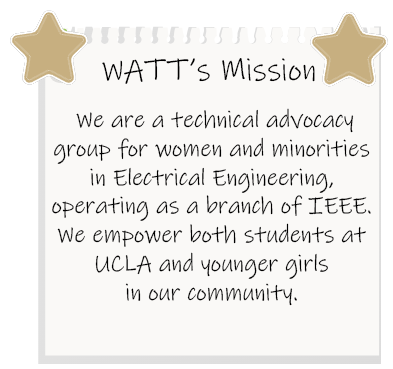
<style>
.page{position:relative;width:393px;height:369px;background:#faf9f7}
.page>*{position:absolute;margin:0}
.t1{font:32px "InkFree";color:#000000}
.t2{font:24px "InkFree";color:#000000}
</style>
<div class="page">
<p class="t1" style="left:102px;top:58px;width:213px;height:26px">WATT’s Mission</p>
<p class="t2" style="left:52px;top:108px;width:319px;height:198px;text-align:center">We are a technical advocacy <br>group for women and minorities <br>in Electrical Engineering, <br>operating as a branch of IEEE. <br>We empower both students at <br>UCLA and younger girls <br>in our community.</p>
</div>
